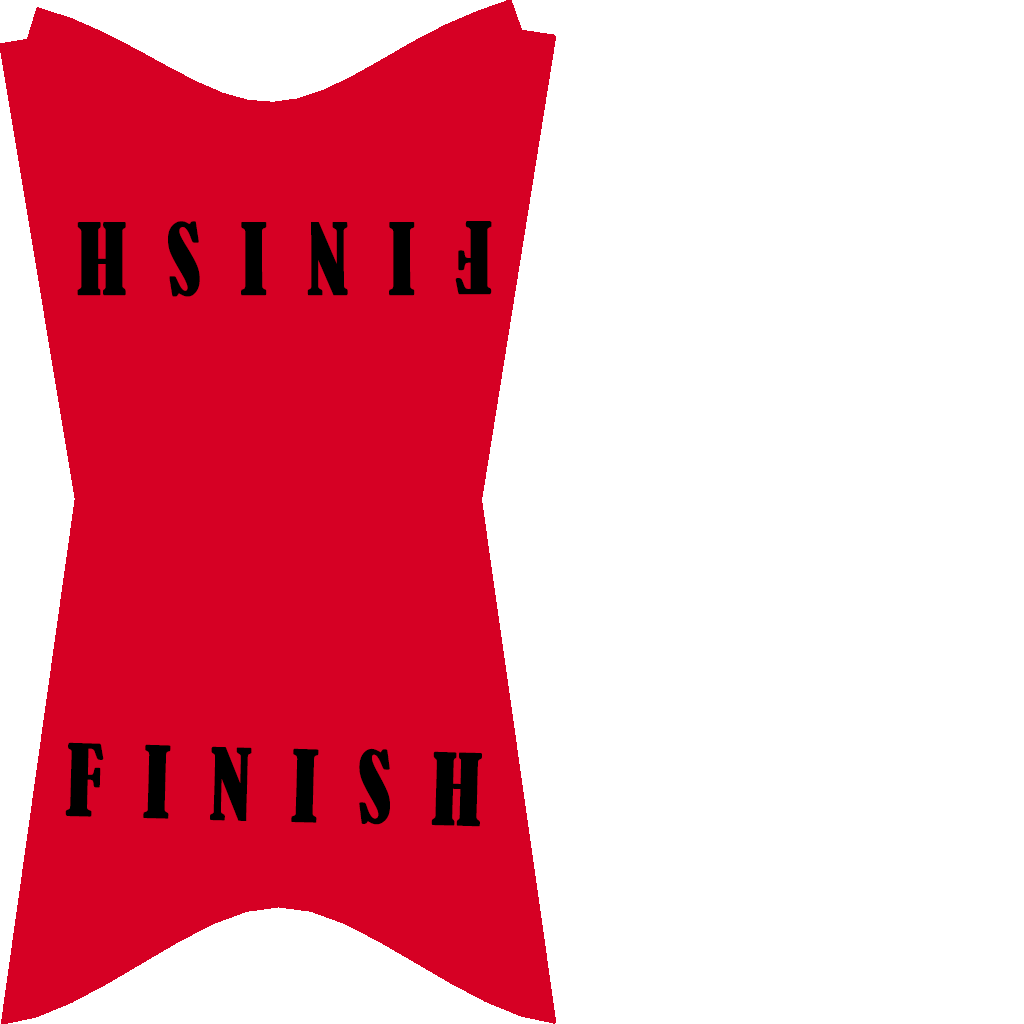
<style>
.page{position:relative;width:1024px;height:1024px;background:#ffffff}
.page>*{position:absolute;margin:0}
.t1{font:93px "BernardMT-Condensed";letter-spacing:0.42em;color:#000000;text-transform:uppercase}
</style>
<div class="page">
<p class="t1" style="left:77px;top:221px;width:415px;height:76px;rotate:180deg">Finish</p>
<p class="t1" style="left:65px;top:742px;width:417px;height:85px;rotate:2deg">Finish</p>
</div>
